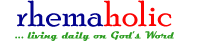
<style>
.page{position:relative;width:197px;height:47px;background:#ffffff}
.page>*{position:absolute;margin:0}
.t1{font:10.4px "Magneto-Bold";color:#2f9e24}
.t2{font:36.7px "PoorRichard-Regular";color:#04048e}
.t3{font:36.7px "PoorRichard-Regular";color:#fa0404}
</style>
<div class="page">
<p class="t1" style="left:15px;top:0px;width:159px;height:41px;text-align:center"><span class="t2">rhema</span><span class="t3">holic<br></span>... living daily on God’s Word</p>
</div>
